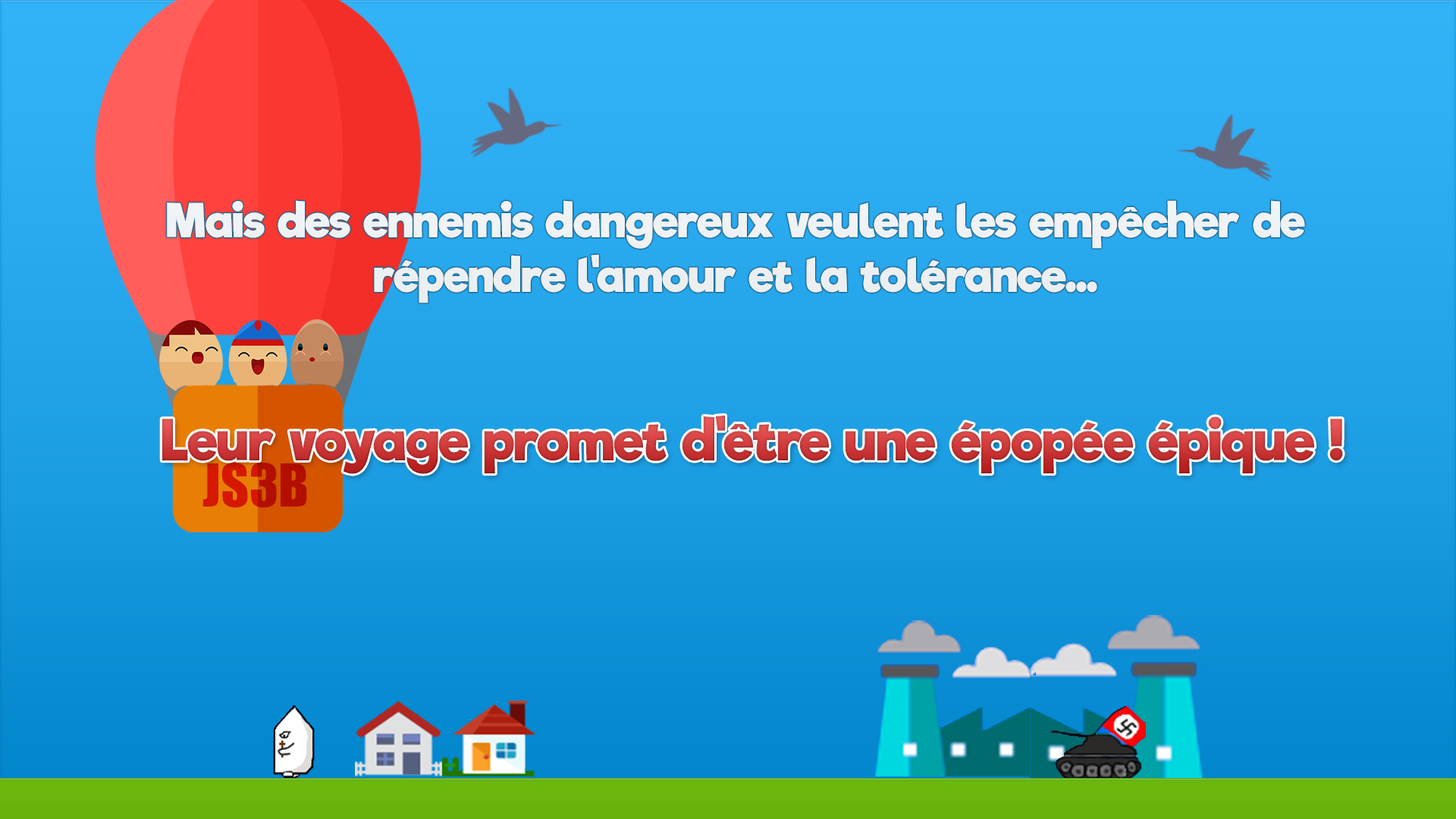
<style>
.page{position:relative;width:1456px;height:819px}
.page>*{position:absolute;margin:0}
.t1{font:45.5px "RifficFree-Bold";color:#eef2f4}
.t2{font:54.6px "RifficFree-Bold";color:#c93a3a}
.t3{font:54.6px "Impact"}
</style>
<div class="page">
<p class="t1" style="left:167px;top:200px;width:1138px;height:103px;text-align:center">Mais des ennemis dangereux veulent les empêcher de répendre l'amour et la tolérance...</p>
<p class="t2" style="left:162px;top:416px;width:1181px;height:58px">Leur voyage promet d'être une épopée épique !</p>
<p class="t3" style="left:202px;top:463px;width:105px;height:45px">JS3B</p>
</div>
